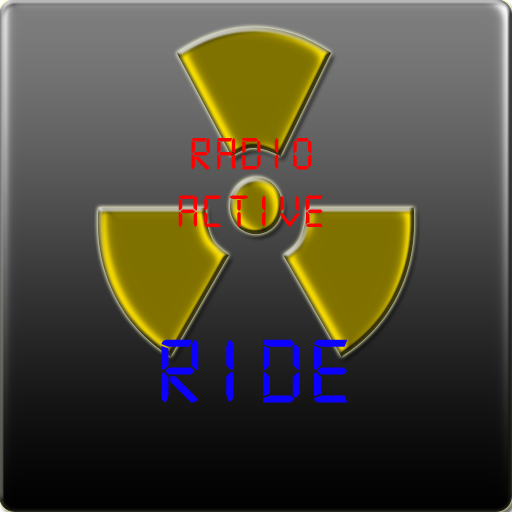
<style>
.page{position:relative;width:512px;height:512px}
.page>*{position:absolute;margin:0}
.t1{font:48px "Digital-7Mono";letter-spacing:0.075em;color:#ff0000}
.t2{font:96px "Digital-7Mono";letter-spacing:0.075em;color:#0c00ff}
</style>
<div class="page">
<p class="t1" style="left:178px;top:138px;width:145px;height:89px;text-align:center">RADIO<br>ACTIVE</p>
<p class="t2" style="left:161px;top:339px;width:187px;height:64px">ride</p>
</div>
